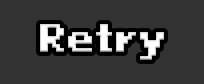
<style>
.page{position:relative;width:204px;height:84px;background:#333333}
.page>*{position:absolute;margin:0}
.t1{font:36px "PixeloidSans-Bold"}
</style>
<div class="page">
<p class="t1" style="left:40px;top:24px;width:124px;height:36px">Retry</p>
</div>
